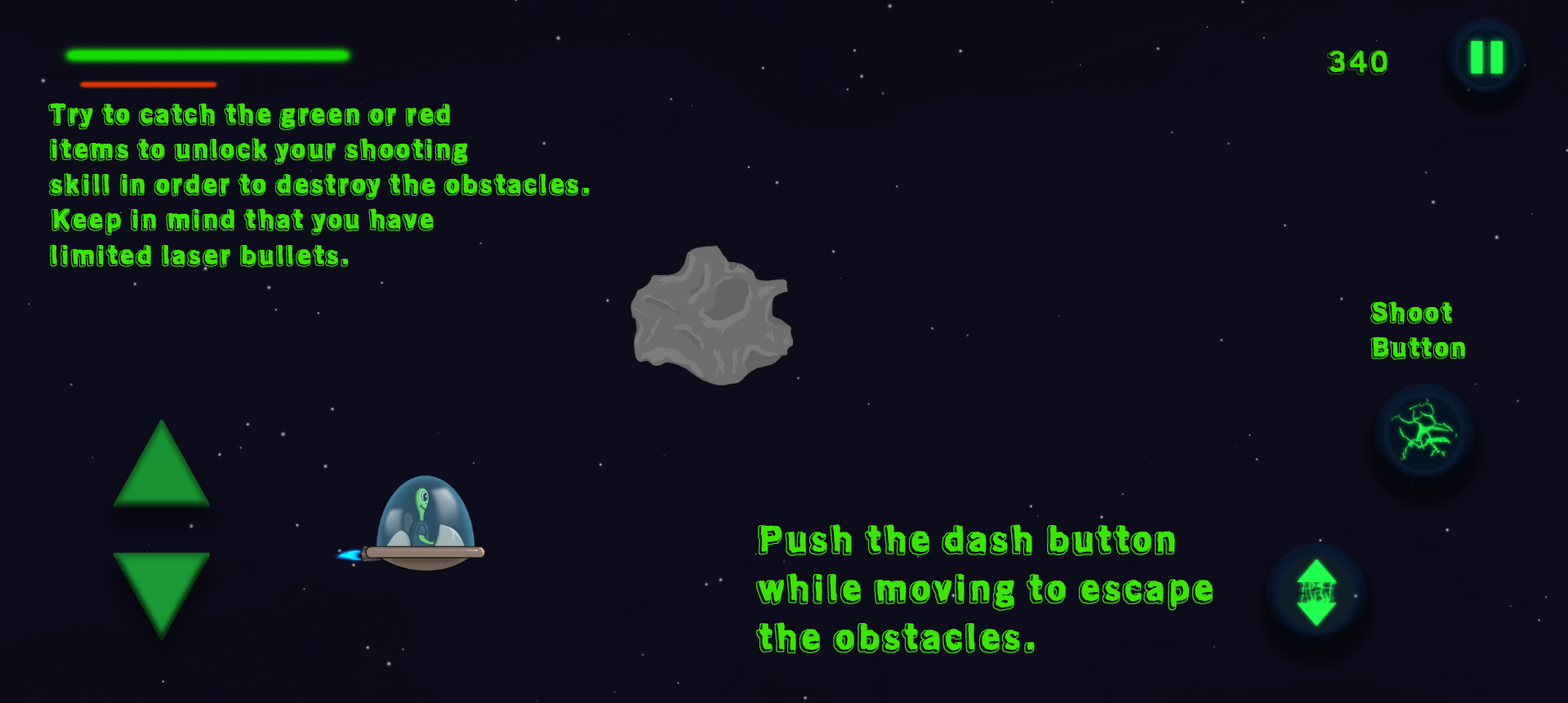
<style>
.page{position:relative;width:1568px;height:703px;background:#0c0c1a}
.page>*{position:absolute;margin:0}
.t1{font:29.4px "Almostliketheblues";color:#3ae700}
.t2{font:40.8px "Almostliketheblues";color:#3ae700}
</style>
<div class="page">
<p class="t1" style="left:48px;top:103px;width:542px;height:165px">Try to catch the green or red <br>items to unlock your shooting <br>skill in order to destroy the obstacles. <br>кKeep in mind that you have <br>limited laser bullets.</p>
<p class="t1" style="left:1370px;top:301px;width:95px;height:59px">Shoot <br>Button</p>
<p class="t2" style="left:756px;top:524px;width:457px;height:130px">Push the dash button <br>while moving to escape <br>the obstacles.</p>
</div>
